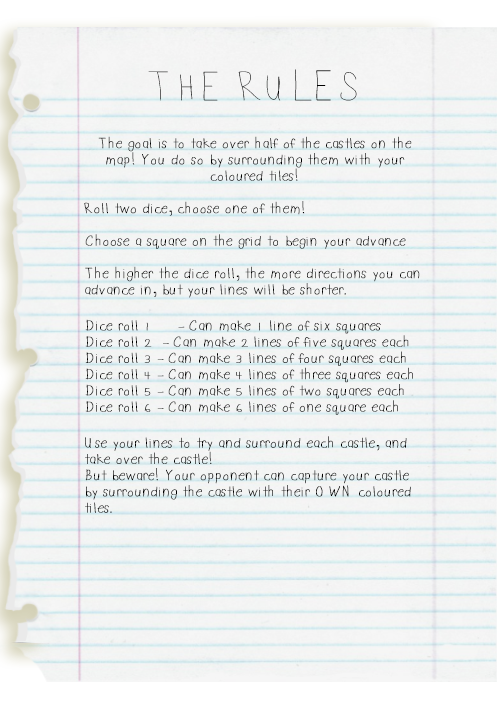
<style>
.page{position:relative;width:500px;height:709px}
.page>*{position:absolute;margin:0}
.t1{font:14.4px/16.2px "DSnetChild";color:#000000;font-weight:bold}
.t2{font:41.6px/31.2px "DSnetChild";color:#000000}
.t3{font:36.1px/31.2px "DSnetChild";color:#000000}
.t4{font:43.3px/31.2px "DSnetChild";color:#000000}
</style>
<div class="page">
<p class="t1" style="left:84px;top:69px;width:336px;height:444px;text-align:center"><span class="t2">T</span><span class="t3">H</span><span class="t2">E R</span><span class="t3">U</span><span class="t2">L</span><span class="t4">E</span><span class="t2">S<br><br></span>The goal is to take over half of the castles on the map! You do so by surrounding them with your coloured tiles!<br><br>Roll two dice, choose one of them!<br><br>Choose a square on the grid to begin your advance<br><br>The higher the dice roll, the more directions you can advance in, but your lines will be shorter.<br><br>Dice roll 1     - Can make 1 line of six squares<br>Dice roll 2  - Can make 2 lines of five squares each<br>Dice roll 3 - Can make 3 lines of four squares each<br>Dice roll 4 - Can make 4 lines of three squares each<br>Dice roll 5 - Can make 5 lines of two squares each<br>Dice roll 6 - Can make 6 lines of one square each<br><br>Use your lines to try and surround each castle, and take over the castle!<br>But beware! Your opponent can capture your castle by surrounding the castle with their OWN coloured tiles.</p>
</div>
